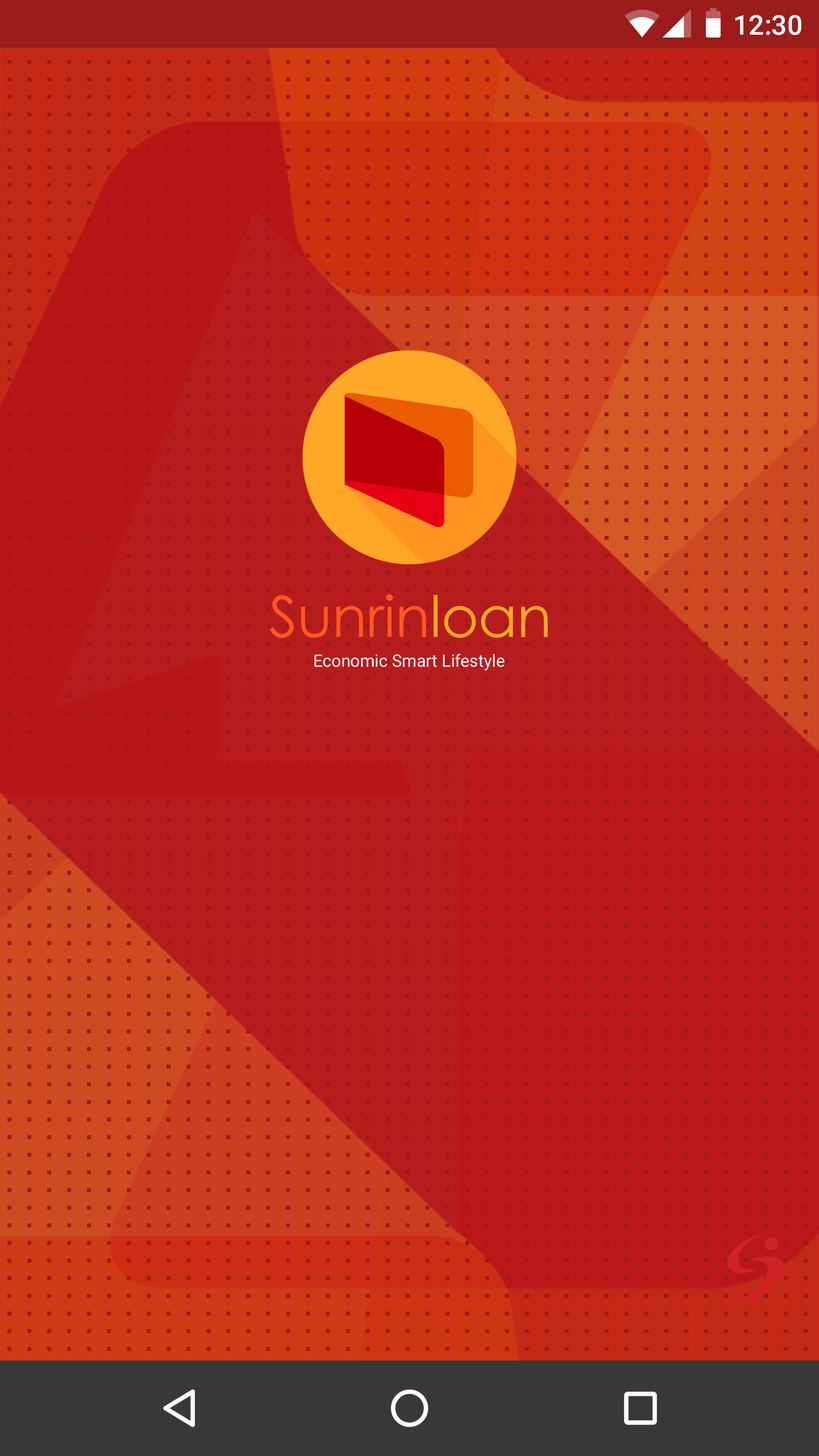
<style>
.page{position:relative;width:819px;height:1456px}
.page>*{position:absolute;margin:0}
.t1{font:27.3px "Roboto-Medium";color:#ffffff}
.t2{font:56.9px "CenturyGothic";color:#ff5722}
.t3{font:56.9px "CenturyGothic";color:#ffa726}
</style>
<div class="page">
<p class="t1" style="left:735px;top:15px;width:66px;height:20px">12:30</p>
<p class="t2" style="left:270px;top:594px;width:278px;height:44px">Sunrin<span class="t3">loan</span></p>
</div>
